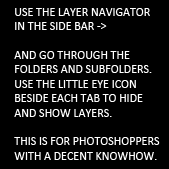
<style>
.page{position:relative;width:169px;height:169px;background:#000000}
.page>*{position:absolute;margin:0}
.t1{font:12px "Calibri";color:#ffffff}
</style>
<div class="page">
<p class="t1" style="left:14px;top:8px;width:146px;height:152px">USE THE LAYER NAVIGATOR <br>IN THE SIDE BAR -&gt;<br><br>AND GO THROUGH THE FOLDERS AND SUBFOLDERS. USE THE LITTLE EYE ICON BESIDE EACH TAB TO HIDE AND SHOW LAYERS.<br><br>THIS IS FOR PHOTOSHOPPERS<br>WITH A DECENT KNOWHOW.</p>
</div>
